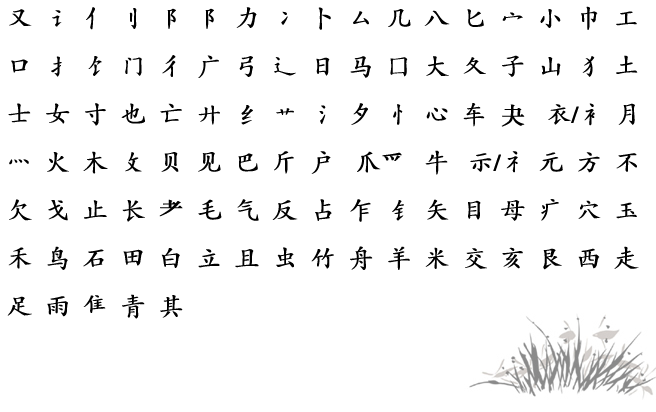
<style>
.page{position:relative;width:656px;height:412px;background:#ffffff}
.page>*{position:absolute;margin:0}
.t1{font:24px/48px "CTKaiTiSJ";color:#000000;font-weight:bold}
.t2{font:24px/48px "STZhongsong";color:#000000;font-weight:bold}
</style>
<div class="page">
<p class="t1" style="left:7px;top:6px;width:632px;height:313px">又  讠  亻  刂  阝  阝  力  冫  卜  厶  几  八  匕  宀  小  巾  工口  扌  饣  门  彳  广  弓  辶  日  马  囗  大  夂  子  山  犭  土士  女  寸  也  亡  廾  纟  艹  氵  夕  忄  心  车  <span class="t2">夬   </span>衣/衤  月  灬  火  木  攵  贝  见  巴  斤  户   爪<span class="t2">爫   </span>牛   示/礻  元  方  不  欠  戈  止  长  <span class="t2">耂  </span>毛  气  反  占  乍  钅  矢  目  母  疒  穴  玉  禾  鸟  石  田  白  立  且  虫  竹  舟  羊  米  交  亥  艮  西  走  足  雨  隹  青  其</p>
</div>
